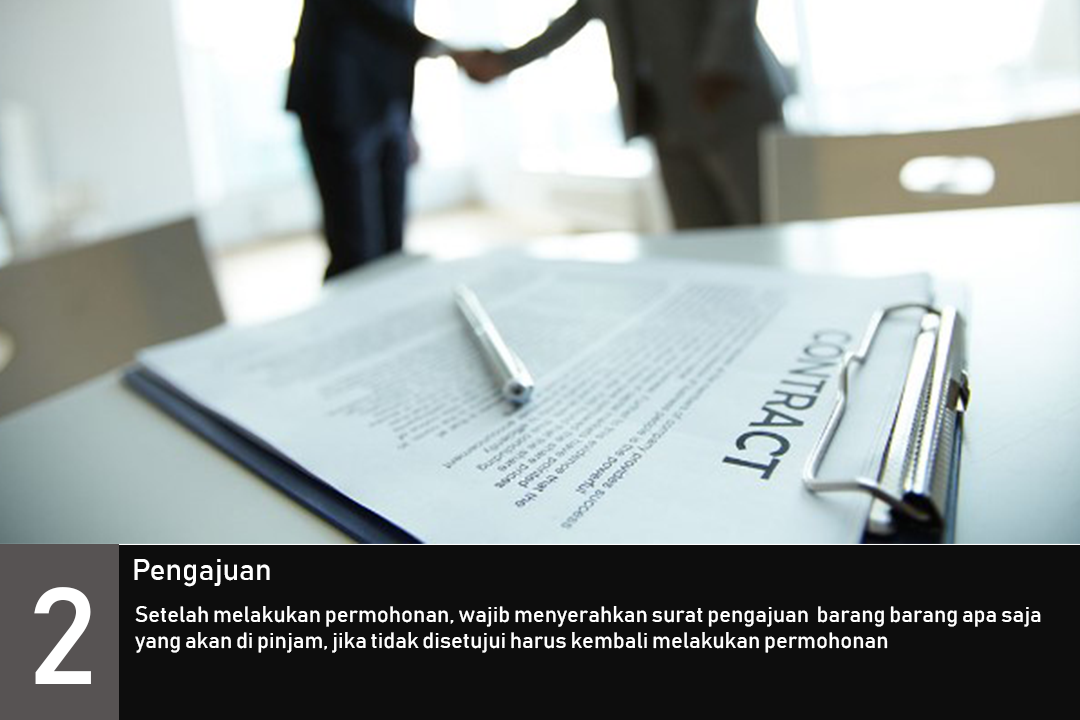
<style>
.page{position:relative;width:1080px;height:720px;background:#0d0d0d}
.page>*{position:absolute;margin:0}
.t1{font:30px "Bahnschrift";color:#ffffff}
.t2{font:135.3px "Bahnschrift";color:#ffffff}
.t3{font:22px "Bahnschrift";color:#ffffff}
</style>
<div class="page">
<p class="t1" style="left:134px;top:559px;width:136px;height:28px">Pengajuan</p>
<p class="t2" style="left:34px;top:587px;width:57px;height:97px">2</p>
<p class="t3" style="left:135px;top:606px;width:906px;height:47px">Setelah melakukan permohonan, wajib menyerahkan surat pengajuan  barang barang apa saja yang akan di pinjam, jika tidak disetujui harus kembali melakukan permohonan</p>
</div>
